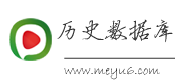
<style>
.page{position:relative;width:175px;height:84px;background:#ffffff}
.page>*{position:absolute;margin:0}
.t1{font:24px "FZYBXSJW--GB1-0";color:#333333}
.t2{font:13.3px "BradleyHandITC"}
</style>
<div class="page">
<p class="t1" style="left:57px;top:19px;width:116px;height:24px">历史数据库</p>
<p class="t2" style="left:64px;top:67px;width:96px;height:13px">www.meyu6.com</p>
</div>
